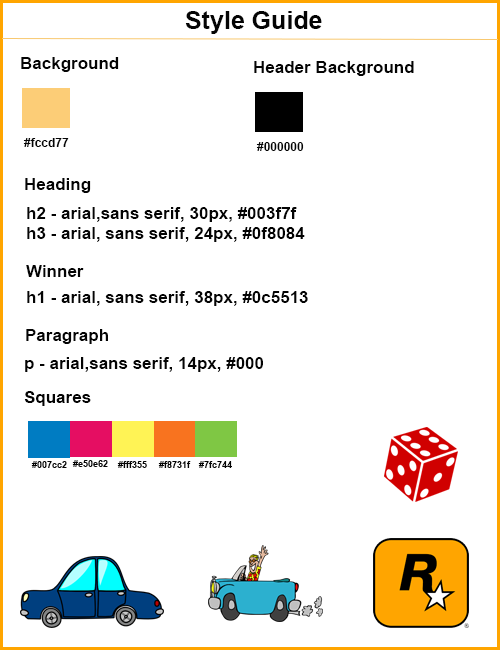
<style>
.page{position:relative;width:500px;height:650px;background:#ffffff}
.page>*{position:absolute;margin:0}
.t1{font:25px "Arial-BoldMT";color:#040404}
.t2{font:17px "Arial-BoldMT";color:#040404}
.t3{font:12px "Arial-BoldMT";color:#040404}
.t4{font:17px "Arial-BoldMT";color:#000000}
.t5{font:8.9px "Arial-BoldMT";color:#040404}
</style>
<div class="page">
<p class="t1" style="left:185px;top:11px;width:137px;height:23px">Style Guide</p>
<p class="t2" style="left:21px;top:57px;width:98px;height:15px">Background</p>
<p class="t2" style="left:254px;top:61px;width:160px;height:15px">Header Background</p>
<p class="t3" style="left:23px;top:138px;width:46px;height:9px">#fccd77</p>
<p class="t3" style="left:256px;top:142px;width:48px;height:9px">#000000</p>
<p class="t2" style="left:25px;top:178px;width:66px;height:15px">Heading</p>
<p class="t2" style="left:27px;top:207px;width:278px;height:35px">h2 - arial,sans serif, 30px, #003f7f<br>h3 - arial, sans serif, 24px, <span class="t4">#0f8084</span></p>
<p class="t2" style="left:26px;top:265px;width:58px;height:12px">Winner</p>
<p class="t2" style="left:27px;top:291px;width:281px;height:15px">h1 - arial, sans serif, 38px, #0c5513</p>
<p class="t2" style="left:26px;top:329px;width:82px;height:15px">Paragraph</p>
<p class="t2" style="left:25px;top:357px;width:238px;height:15px">p - arial,sans serif, 14px, #000</p>
<p class="t2" style="left:24px;top:391px;width:67px;height:15px">Squares</p>
<p class="t5" style="left:31px;top:461px;width:36px;height:7px">#007cc2</p>
<p class="t5" style="left:72px;top:460px;width:36px;height:7px">#e50e62</p>
<p class="t5" style="left:117px;top:461px;width:30px;height:7px">#fff355</p>
<p class="t5" style="left:158px;top:461px;width:33px;height:7px">#f8731f</p>
<p class="t5" style="left:198px;top:461px;width:34px;height:7px">#7fc744</p>
</div>
